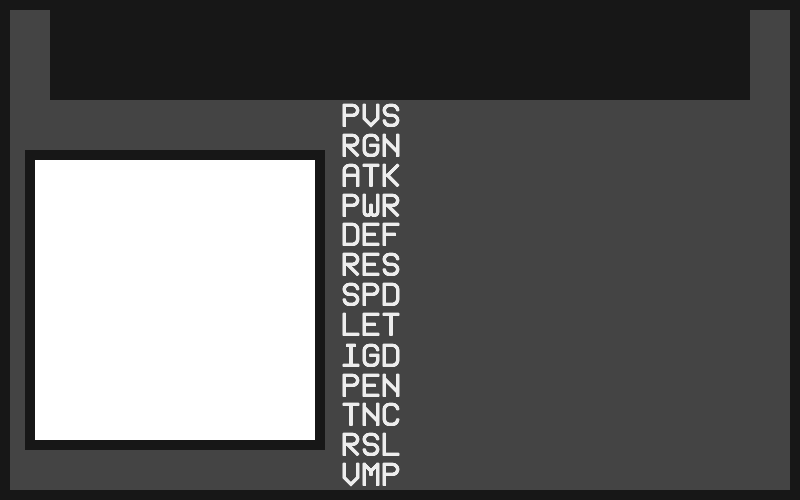
<style>
.page{position:relative;width:800px;height:500px;background:#444444}
.page>*{position:absolute;margin:0}
.t1{font:30px "Telegrama-Render";color:#ededed}
</style>
<div class="page">
<p class="t1" style="left:342px;top:103px;width:58px;height:25px">PVS</p>
<p class="t1" style="left:342px;top:133px;width:58px;height:25px">RGN</p>
<p class="t1" style="left:342px;top:163px;width:58px;height:25px">ATK</p>
<p class="t1" style="left:342px;top:193px;width:58px;height:25px">PWR</p>
<p class="t1" style="left:342px;top:222px;width:58px;height:24px">DEF</p>
<p class="t1" style="left:342px;top:252px;width:58px;height:25px">RES</p>
<p class="t1" style="left:342px;top:282px;width:58px;height:24px">SPD</p>
<p class="t1" style="left:342px;top:312px;width:58px;height:24px">LET</p>
<p class="t1" style="left:342px;top:343px;width:58px;height:24px">IGD</p>
<p class="t1" style="left:342px;top:373px;width:58px;height:24px">PEN</p>
<p class="t1" style="left:342px;top:402px;width:58px;height:24px">TNC</p>
<p class="t1" style="left:342px;top:432px;width:58px;height:25px">RSL</p>
<p class="t1" style="left:342px;top:462px;width:58px;height:25px">VMP</p>
</div>
